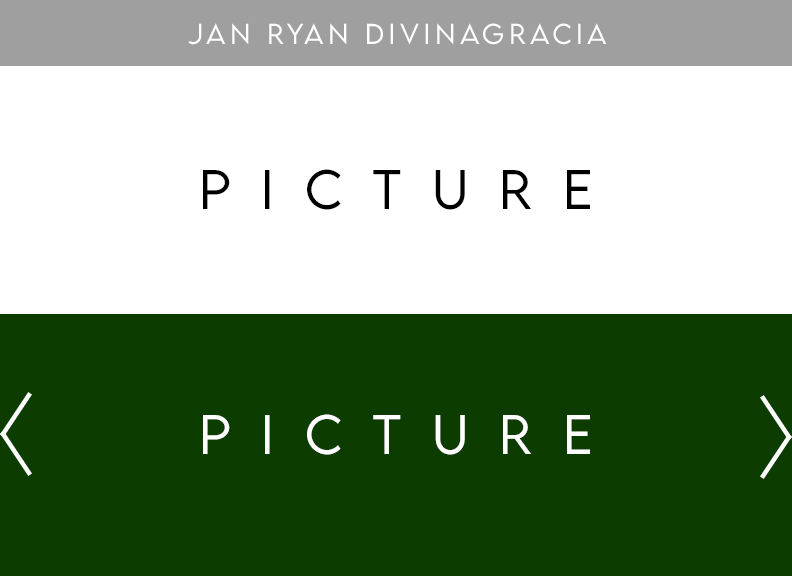
<style>
.page{position:relative;width:792px;height:576px;background:#0c3c00}
.page>*{position:absolute;margin:0}
.t1{font:25.6px "LEMONMILK-Light";letter-spacing:0.18em;color:#ffffff}
.t2{font:49.6px "LEMONMILK-Light";letter-spacing:0.62em;color:#000000}
.t3{font:49.6px "LEMONMILK-Light";letter-spacing:0.62em;color:#ffffff}
</style>
<div class="page">
<p class="t1" style="left:188px;top:23px;width:419px;height:22px">Jan Ryan Divinagracia</p>
<p class="t2" style="left:203px;top:169px;width:387px;height:41px">Picture</p>
<p class="t3" style="left:203px;top:414px;width:387px;height:41px">Picture</p>
</div>
